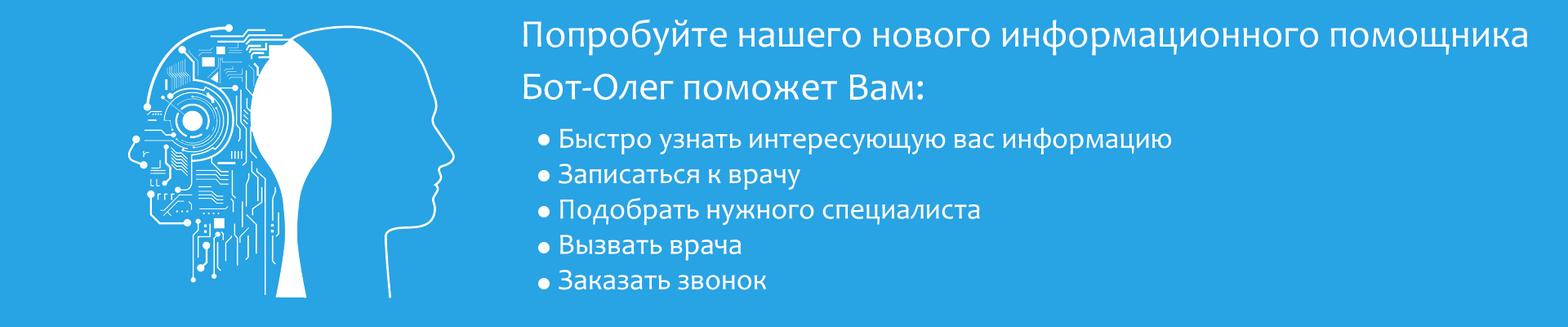
<style>
.page{position:relative;width:1568px;height:327px;background:#28a3e4}
.page>*{position:absolute;margin:0}
.t1{font:39.2px "Candara";color:#ffffff}
.t2{font:29.4px "Candara";color:#ffffff}
</style>
<div class="page">
<p class="t1" style="left:523px;top:19px;width:1005px;height:37px">Попробуйте нашего нового информационного помощника</p>
<p class="t1" style="left:523px;top:74px;width:400px;height:26px">Бот-Олег поможет Вам:</p>
<p class="t2" style="left:559px;top:127px;width:612px;height:163px">Быстро узнать интересующую вас информацию<br>Записаться к врачу<br>Подобрать нужного специалиста<br>Вызвать врача<br>Заказать звонок</p>
</div>
